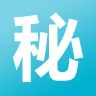
<style>
.page{position:relative;width:96px;height:96px;background:#ffffff}
.page>*{position:absolute;margin:0}
.t1{font:72px "MicrosoftYaHei";color:#ffffff}
</style>
<div class="page">
<p class="t1" style="left:12px;top:12px;width:72px;height:70px">秘</p>
</div>
